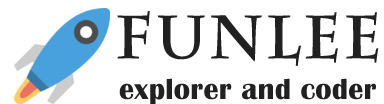
<style>
.page{position:relative;width:384px;height:104px;background:#ffffff}
.page>*{position:absolute;margin:0}
.t1{font:60px "CharlemagneStd-Bold";letter-spacing:0.01em;color:#212121;font-weight:bold}
.t2{font:30px "BritannicBold";letter-spacing:0.01em;color:#212121}
</style>
<div class="page">
<p class="t1" style="left:117px;top:11px;width:262px;height:55px">funlee</p>
<p class="t2" style="left:119px;top:78px;width:257px;height:26px">explorer and coder</p>
</div>
